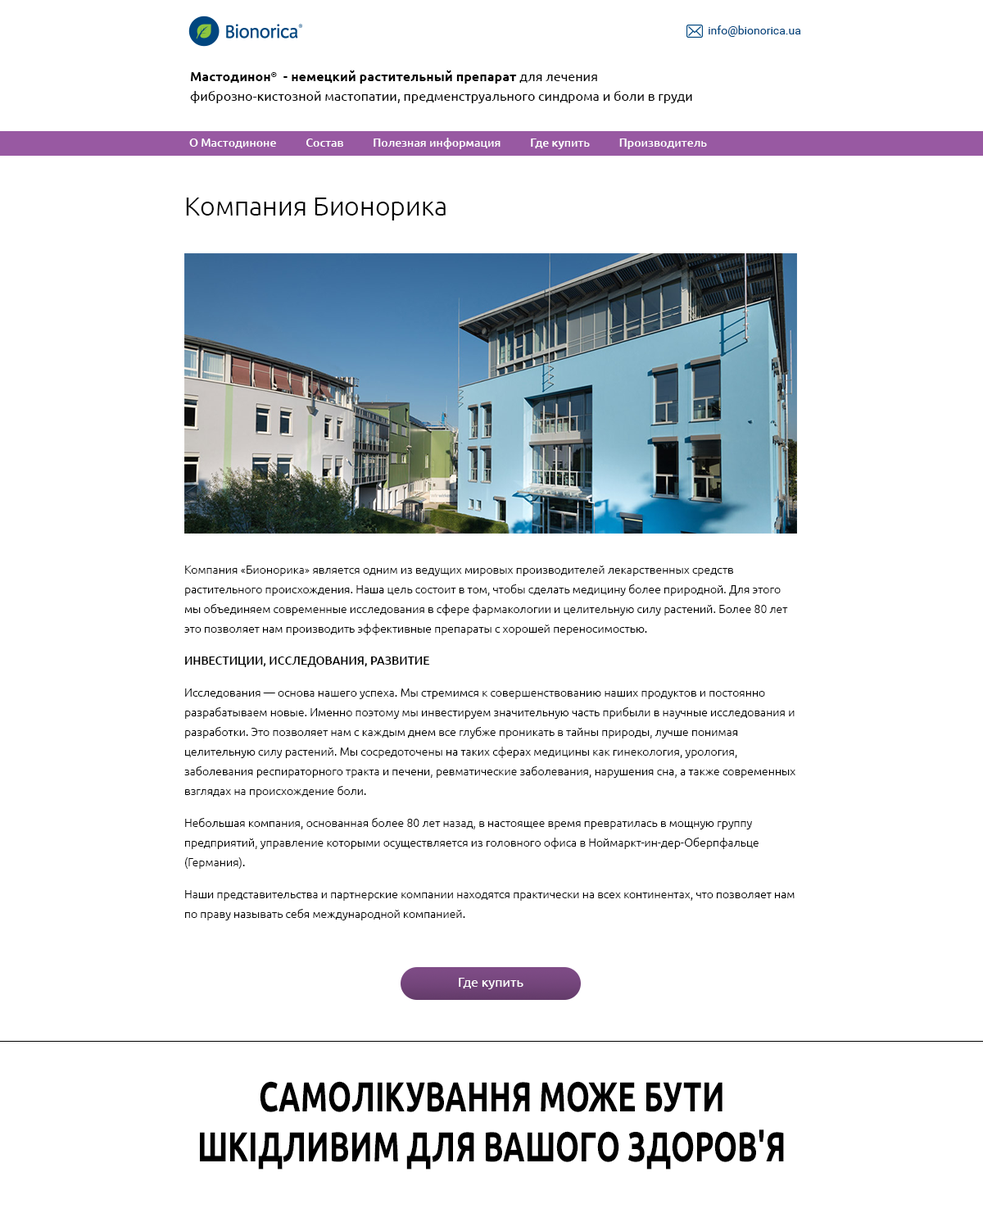
<style>
.page{position:relative;width:983px;height:1213px;background:#ffffff}
.page>*{position:absolute;margin:0}
.t1{font:11.5px "Roboto-Regular";color:#00467f}
.t2{font:13.1px/19.7px "Ubuntu";color:#000000}
.t3{font:13.1px/19.7px "Ubuntu-Bold";color:#000000}
.t4{font:13.1px "Ubuntu-Bold";color:#000000}
.t5{font:11.5px "Ubuntu-Medium";color:#ffffff}
.t6{font:26.2px "Ubuntu-Light";color:#000000}
.t7{font:11.5px/19.7px "Ubuntu-Light";color:#000000}
.t8{font:11.5px/19.7px "Ubuntu-Medium";color:#000000;text-transform:uppercase}
.t9{font:13.1px "Ubuntu";color:#ffffff}
.t10{font:41.8px "Ubuntu-Bold";color:#000000;scale:0.72 1}
</style>
<div class="page">
<p class="t1" style="left:709px;top:25px;width:92px;height:12px">info@bionorica.ua</p>
<p class="t2" style="left:190px;top:70px;width:502px;height:33px"><span class="t3">Мастодинон</span><span class="t4">®</span><span class="t3">  - немецкий растительный препарат </span>для лечения <br>фиброзно-кистoзной мастопатии, предменструального синдрома и боли в груди</p>
<p class="t5" style="left:189px;top:138px;width:518px;height:11px">О Мастодиноне           Состав           Полезная информация           Где купить           Производитель</p>
<p class="t6" style="left:186px;top:197px;width:260px;height:23px">Компания Бионорика</p>
<p class="t7" style="left:184px;top:565px;width:612px;height:355px">Компания «Бионорика» является одним из ведущих мировых производителей лекарственных средств растительного происхождения. Наша цель состоит в том, чтобы сделать медицину более природной. Для этого мы объединяем современные исследования в сфере фармакологии и целительную силу растений. Более 80 лет это позволяет нам производить эффективные препараты с хорошей переносимостью.<br><span class="t8">Инвестиции, исследования, развитие<br></span>Исследования — основа нашего успеха. Мы стремимся к совершенствованию наших продуктов и постоянно разрабатываем новые. Именно поэтому мы инвестируем значительную часть прибыли в научные исследования и разработки. Это позволяет нам с каждым днем все глубже проникать в тайны природы, лучше понимая целительную силу растений. Мы сосредоточены на таких сферах медицины как гинекология, урология, заболевания респираторного тракта и печени, ревматические заболевания, нарушения сна, а также современных взглядах на происхождение боли.<br>Небольшая компания, основанная более 80 лет назад, в настоящее время превратилась в мощную группу предприятий, управление которыми осуществляется из головного офиса в Ноймаркт-ин-дер-Оберпфальце (Германия).<br>Наши представительства и партнерские компании находятся практически на всех континентах, что позволяет нам по праву называть себя международной компанией.</p>
<p class="t9" style="left:459px;top:978px;width:65px;height:11px">Где купить</p>
<p class="t10" style="left:200px;top:1081px;width:584px;height:88px;text-align:center">САМОЛІКУВАННЯ МОЖЕ БУТИ<br>ШКІДЛИВИМ ДЛЯ ВАШОГО ЗДОРОВ'Я</p>
</div>
